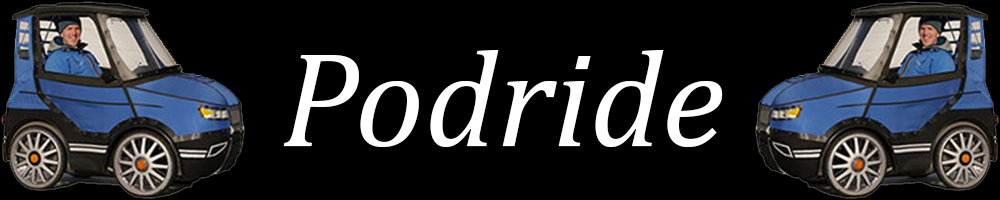
<style>
.page{position:relative;width:1000px;height:200px;background:#000000}
.page>*{position:absolute;margin:0}
.t1{font:137.5px "Cambria-Italic";color:#ffffff}
</style>
<div class="page">
<p class="t1" style="left:283px;top:50px;width:440px;height:97px">Podride</p>
</div>
